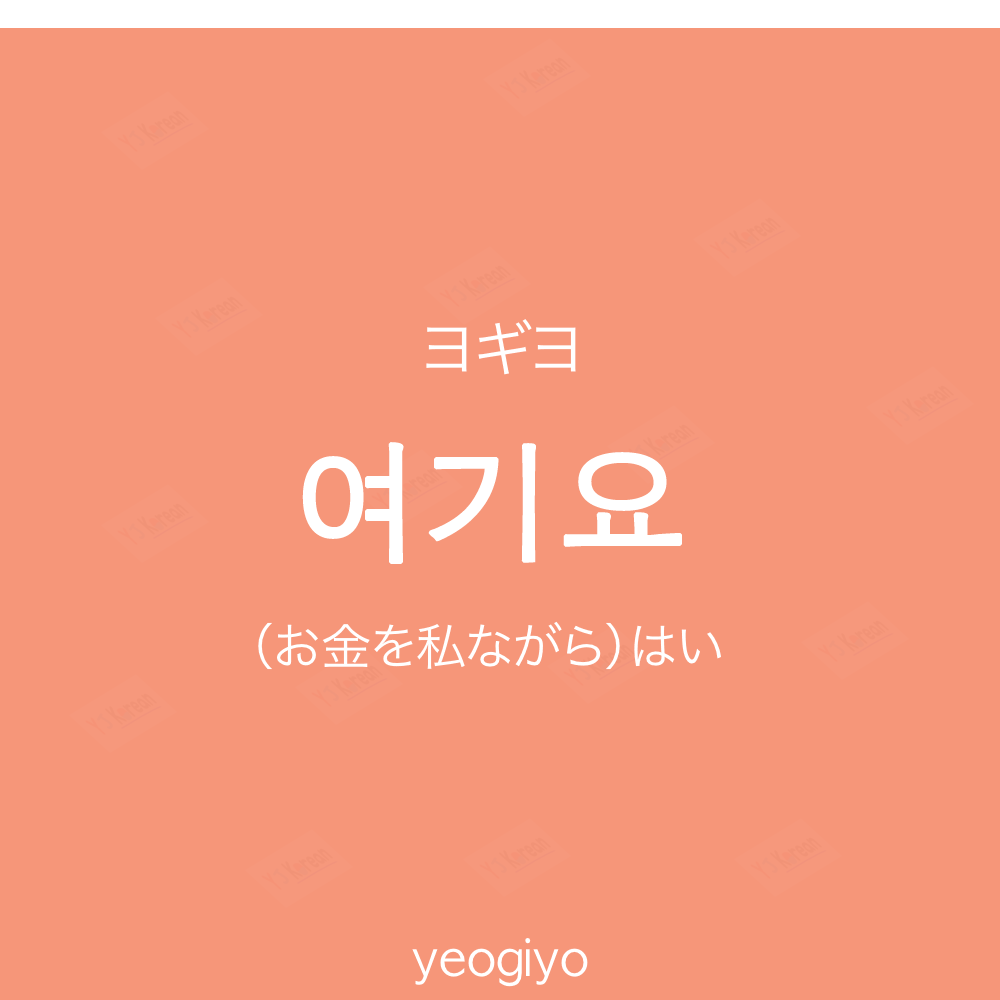
<style>
.page{position:relative;width:1000px;height:1000px;background:#f69679}
.page>*{position:absolute;margin:0}
.t1{font:60px "HiraKakuProN-W3";color:#ffffff;text-transform:uppercase}
.t2{font:130px "AppleGothic";color:#ffffff;font-weight:bold}
.t3{font:50px "HiraKakuProN-W3";color:#ffffff}
.t4{font:50px "AppleGothic";color:#ffffff}
</style>
<div class="page">
<p class="t1" style="left:426px;top:319px;width:150px;height:56px">ヨギヨ</p>
<p class="t2" style="left:302px;top:442px;width:380px;height:122px">여기요</p>
<p class="t3" style="left:258px;top:621px;width:463px;height:49px">（お金を私ながら）はい</p>
<p class="t4" style="left:412px;top:938px;width:176px;height:49px">yeogiyo</p>
</div>
